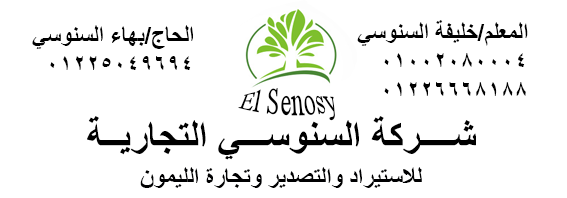
<style>
.page{position:relative;width:567px;height:198px;background:#ffffff}
.page>*{position:absolute;margin:0}
.t1{font:24px "Arial-BoldMT";color:#000000}
.t2{font:24px "TimesNewRomanPSMT";color:#000000}
.t3{font:40px "Arial-BoldMT";color:#000000}
.t4{font:25px "TimesNewRomanPS-BoldMT";color:#000001}
</style>
<div class="page">
<p class="t1" style="left:32px;top:25px;width:161px;height:45px">الحاج/بهاء السنوسي<br>01225049694</p>
<p class="t1" style="left:357px;top:20px;width:171px;height:76px">المعلم/خليفة السنوسي<br>01002080004<br>01226668188</p>
<p class="t2" style="left:238px;top:87px;width:97px;height:34px">El Senosy</p>
<p class="t3" style="left:87px;top:116px;width:389px;height:44px">شــــركة السنوســـي التجاريــة</p>
<p class="t4" style="left:140px;top:167px;width:282px;height:21px">للاستيراد والتصدير وتجارة الليمون</p>
</div>
